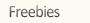
<style>
.page{position:relative;width:90px;height:23px;background:#fdfaf2}
.page>*{position:absolute;margin:0}
.t1{font:17.3px "Calibri";letter-spacing:-0.04em;scale:0.94 1}
</style>
<div class="page">
<p class="t1" style="left:9px;top:5px;width:51px;height:13px">Freebies</p>
</div>
